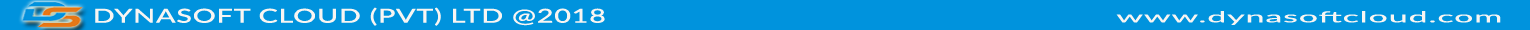
<style>
.page{position:relative;width:1530px;height:30px;background:#0093dd}
.page>*{position:absolute;margin:0}
.t1{font:19.3px "Lato-Medium";letter-spacing:0.025em;color:#f8f5f2;scale:1.49 1}
.t2{font:15.1px "Lato-Regular";letter-spacing:0.025em;color:#f8f5f2;scale:2.26 1}
</style>
<div class="page">
<p class="t1" style="left:95px;top:7px;width:510px;height:19px">DYNASOFT CLOUD (PVT) LTD @2018</p>
<p class="t2" style="left:1116px;top:11px;width:385px;height:14px">www.dynasoftcloud.com</p>
</div>
